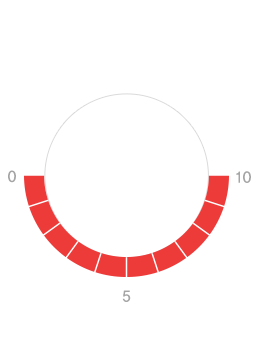
<style>
.page{position:relative;width:256px;height:356px;background:#ffffff}
.page>*{position:absolute;margin:0}
.t1{font:15.5px "YDIYGO340";letter-spacing:-0.01em;color:#a5a5a5;scale:0.97 1}
</style>
<div class="page">
<p class="t1" style="left:8px;top:170px;width:8px;height:13px">0</p>
<p class="t1" style="left:236px;top:171px;width:15px;height:12px">10</p>
<p class="t1" style="left:122px;top:290px;width:9px;height:12px">5</p>
</div>
